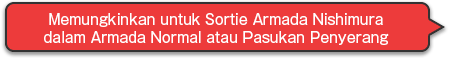
<style>
.page{position:relative;width:450px;height:58px;background:#ed3b3b}
.page>*{position:absolute;margin:0}
.t1{font:14px/18px "GothicMB101Pro-Regular";color:#ffffff}
</style>
<div class="page">
<p class="t1" style="left:44px;top:13px;width:345px;height:32px;text-align:center">Memungkinkan untuk Sortie Armada Nishimura<br>dalam Armada Normal atau Pasukan Penyerang</p>
</div>
